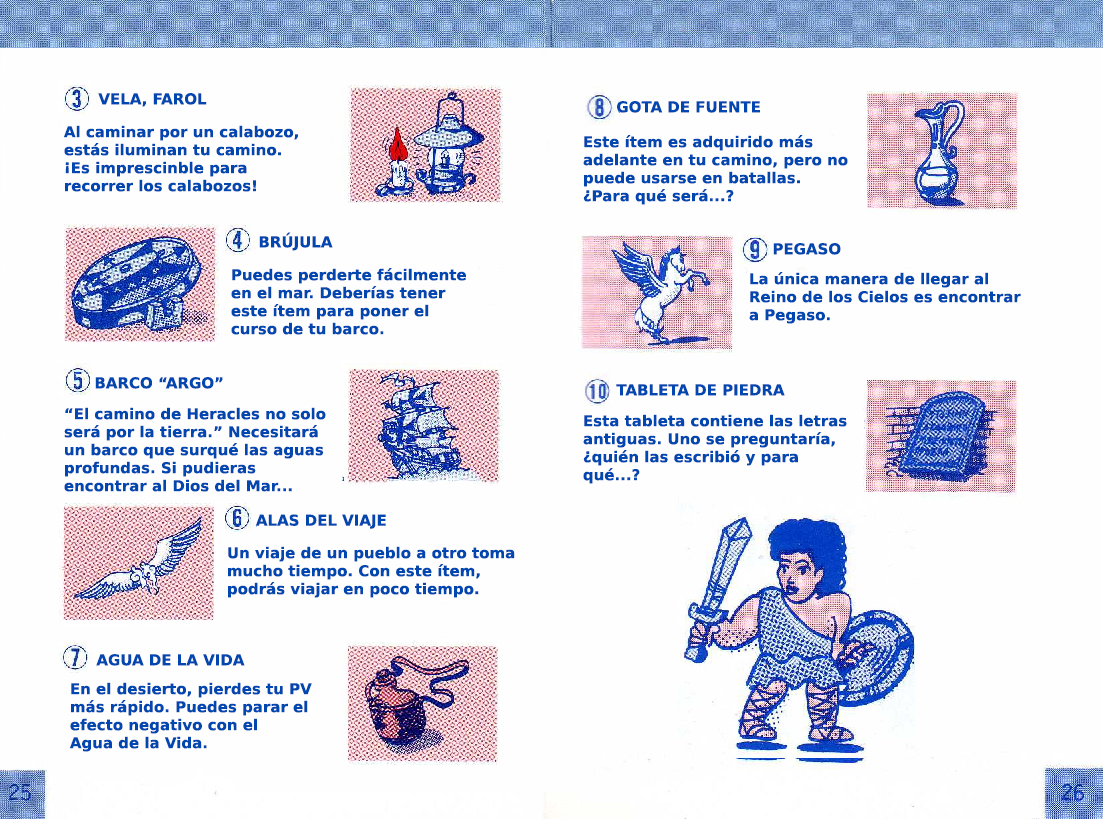
<style>
.page{position:relative;width:1103px;height:819px;background:#fefefe}
.page>*{position:absolute;margin:0}
.t1{font:15px "PrimaSansBT-Bold";color:#0247af}
</style>
<div class="page">
<p class="t1" style="left:98px;top:93px;width:109px;height:14px">VELA, FAROL</p>
<p class="t1" style="left:617px;top:101px;width:143px;height:12px">GOTA DE FUENTE</p>
<p class="t1" style="left:63px;top:125px;width:235px;height:67px">Al caminar por un calabozo,<br>estás iluminan tu camino.<br>¡Es imprescinble para<br>recorrer los calabozos!</p>
<p class="t1" style="left:583px;top:135px;width:265px;height:70px">Este ítem es adquirido más <br>adelante en tu camino, pero no <br>puede usarse en batallas. <br>¿Para qué será...?</p>
<p class="t1" style="left:259px;top:232px;width:74px;height:19px">BRÚJULA</p>
<p class="t1" style="left:773px;top:243px;width:68px;height:12px">PEGASO</p>
<p class="t1" style="left:231px;top:268px;width:235px;height:67px">Puedes perderte fácilmente<br>en el mar. Deberías tener<br>este ítem para poner el<br>curso de tu barco.</p>
<p class="t1" style="left:749px;top:272px;width:272px;height:52px">La única manera de llegar al<br>Reino de los Cielos es encontrar<br>a Pegaso.</p>
<p class="t1" style="left:95px;top:377px;width:128px;height:12px">BARCO “ARGO”</p>
<p class="t1" style="left:616px;top:384px;width:169px;height:12px">TABLETA DE PIEDRA</p>
<p class="t1" style="left:64px;top:407px;width:262px;height:85px">“El camino de Heracles no solo<br>será por la tierra.” Necesitará<br>un barco que surqué las aguas<br>profundas. Si pudieras <br>encontrar al Dios del Mar...</p>
<p class="t1" style="left:583px;top:414px;width:264px;height:70px">Esta tableta contiene las letras<br>antiguas. Uno se preguntaría,<br>¿quién las escribió y para <br>qué...?</p>
<p class="t1" style="left:255px;top:514px;width:131px;height:15px">ALAS DEL VIAJE</p>
<p class="t1" style="left:228px;top:546px;width:287px;height:52px">Un viaje de un pueblo a otro toma<br>mucho tiempo. Con este ítem,<br>podrás viajar en poco tiempo.</p>
<p class="t1" style="left:96px;top:654px;width:149px;height:12px">AGUA DE LA VIDA</p>
<p class="t1" style="left:69px;top:682px;width:243px;height:70px">En el desierto, pierdes tu PV<br>más rápido. Puedes parar el<br>efecto negativo con el <br>Agua de la Vida.</p>
</div>
